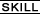
<style>
.page{position:relative;width:40px;height:14px;background:#ffffff}
.page>*{position:absolute;margin:0}
.t1{font:11px "ArialMT";letter-spacing:0.05em;color:#000000;font-weight:bold;scale:1.1 1}
</style>
<div class="page">
<p class="t1" style="left:2px;top:3px;width:36px;height:9px">SKILL</p>
</div>
